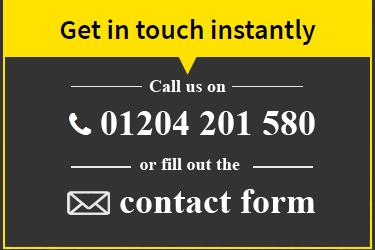
<style>
.page{position:relative;width:375px;height:250px;background:#333333}
.page>*{position:absolute;margin:0}
.t1{font:36px "TimesNewRomanPS-BoldMT";color:#ffffff}
.t2{font:18px "TimesNewRomanPS-BoldMT";color:#ffffff}
</style>
<div class="page">
<p class="t1" style="left:101px;top:80px;width:214px;height:55px;text-align:center"><span class="t2">Call us on<br></span>01204 201 580</p>
<p class="t2" style="left:120px;top:158px;width:195px;height:55px;text-align:center">or fill out the<br><span class="t1"> contact form</span></p>
</div>
